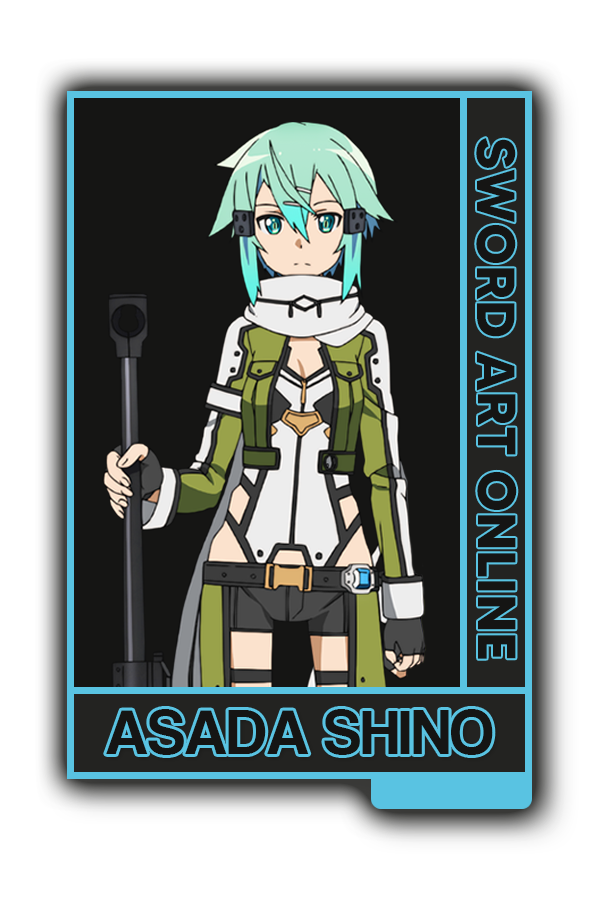
<style>
.page{position:relative;width:600px;height:900px;background:#151514}
.page>*{position:absolute;margin:0}
.t1{font:53.7px "MADETOMMY-Bold";color:#151514}
.t2{font:65.3px "CoolveticaRg-Regular";color:#151514}
</style>
<div class="page">
<p class="t1" style="left:476px;top:138px;width:41px;height:521px;rotate:90deg">SWORD ART ONLINE</p>
<p class="t2" style="left:106px;top:709px;width:387px;height:46px">ASADA SHINO</p>
</div>
